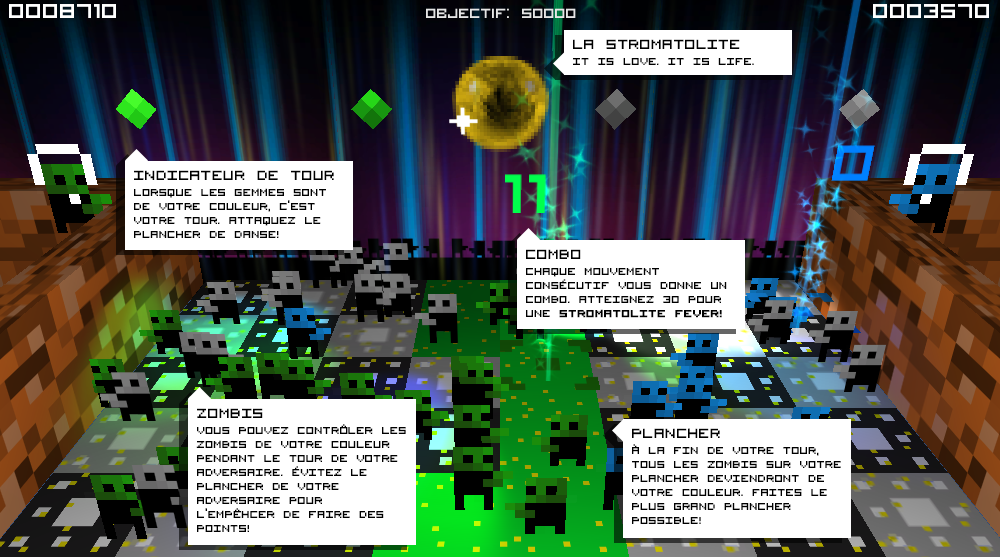
<style>
.page{position:relative;width:1000px;height:557px}
.page>*{position:absolute;margin:0}
.t1{font:24px "VisitorTT2BRK";color:#000000;text-transform:uppercase}
.t2{font:18px "VisitorTT2BRK";color:#000000;text-transform:uppercase}
.t3{font:18px/14px "VisitorTT2BRK";color:#000000;text-transform:uppercase}
.t4{font:18px/14px "VisitorTT2BRK";color:#000000;text-transform:uppercase;font-weight:bold}
</style>
<div class="page">
<p class="t1" style="left:573px;top:39px;width:167px;height:10px">La stromatolite</p>
<p class="t2" style="left:573px;top:58px;width:181px;height:7px">It is love. It is life.</p>
<p class="t1" style="left:134px;top:170px;width:200px;height:10px">Indicateur de tour</p>
<p class="t3" style="left:134px;top:188px;width:192px;height:50px">Lorsque les gemmes sont de votre couleur, c’est votre tour. Attaquez le plancher de danse!</p>
<p class="t1" style="left:526px;top:249px;width:55px;height:10px">Combo</p>
<p class="t3" style="left:526px;top:267px;width:201px;height:51px">Chaque mouvement consécutif vous donne un combo. Atteignez 30 pour une <span class="t4">Stromatolite fever!</span></p>
<p class="t1" style="left:197px;top:408px;width:66px;height:10px">Zombis</p>
<p class="t3" style="left:196px;top:424px;width:210px;height:108px">Vous pouvez contrôler les zombis de votre couleur pendant le tour de votre adversaire. Évitez le plancher de votre adversaire pour l’empêhcer de faire des points!</p>
<p class="t1" style="left:632px;top:428px;width:88px;height:10px">Plancher</p>
<p class="t3" style="left:632px;top:444px;width:209px;height:80px">à la fin de votre tour, tous les zombis sur votre plancher deviendront de votre couleur. Faites le plus grand plancher possible!</p>
</div>
